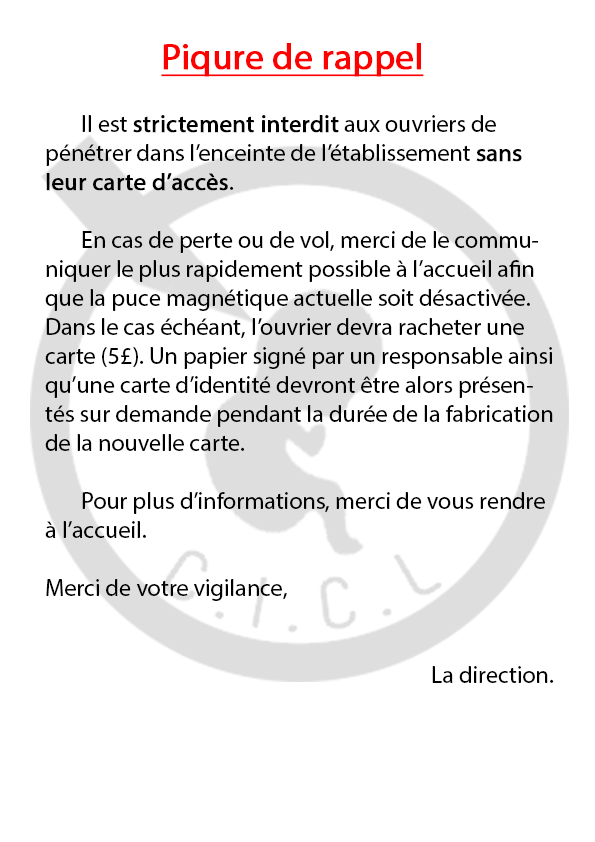
<style>
.page{position:relative;width:595px;height:842px;background:#ffffff}
.page>*{position:absolute;margin:0}
.t1{font:36px "MyriadPro-Regular";color:#ff0000;font-weight:bold;text-decoration:underline}
.t2{font:24px/29px "MyriadPro-Regular";color:#000000}
.t3{font:24px/29px "MyriadPro-Regular";color:#000000;font-weight:bold}
</style>
<div class="page">
<p class="t1" style="left:161px;top:43px;width:263px;height:34px">Piqure de rappel</p>
<p class="t2" style="left:45px;top:115px;width:509px;height:568px">Il est <span class="t3">strictement interdit</span> aux ouvriers de <br>pénétrer dans l’enceinte de l’établissement <span class="t3">sans  leur carte d’accès</span>. <br><br> En cas de perte ou de vol, merci de le communiquer le plus rapidement possible à l’accueil afin que la puce magnétique actuelle soit désactivée. Dans le cas échéant, l’ouvrier devra racheter une carte (5£). Un papier signé par un responsable ainsi qu’une carte d’identité devront être alors présentés sur demande pendant la durée de la fabrication de la nouvelle carte. <br><br> Pour plus d’informations, merci de vous rendre à l’accueil. <br><br>Merci de votre vigilance, <br><br><br>La direction.</p>
</div>
